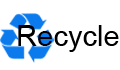
<style>
.page{position:relative;width:120px;height:70px;background:#ffffff}
.page>*{position:absolute;margin:0}
.t1{font:29.2px "ArialMT";color:#000000}
</style>
<div class="page">
<p class="t1" style="left:18px;top:25px;width:101px;height:27px">Recycle</p>
</div>
